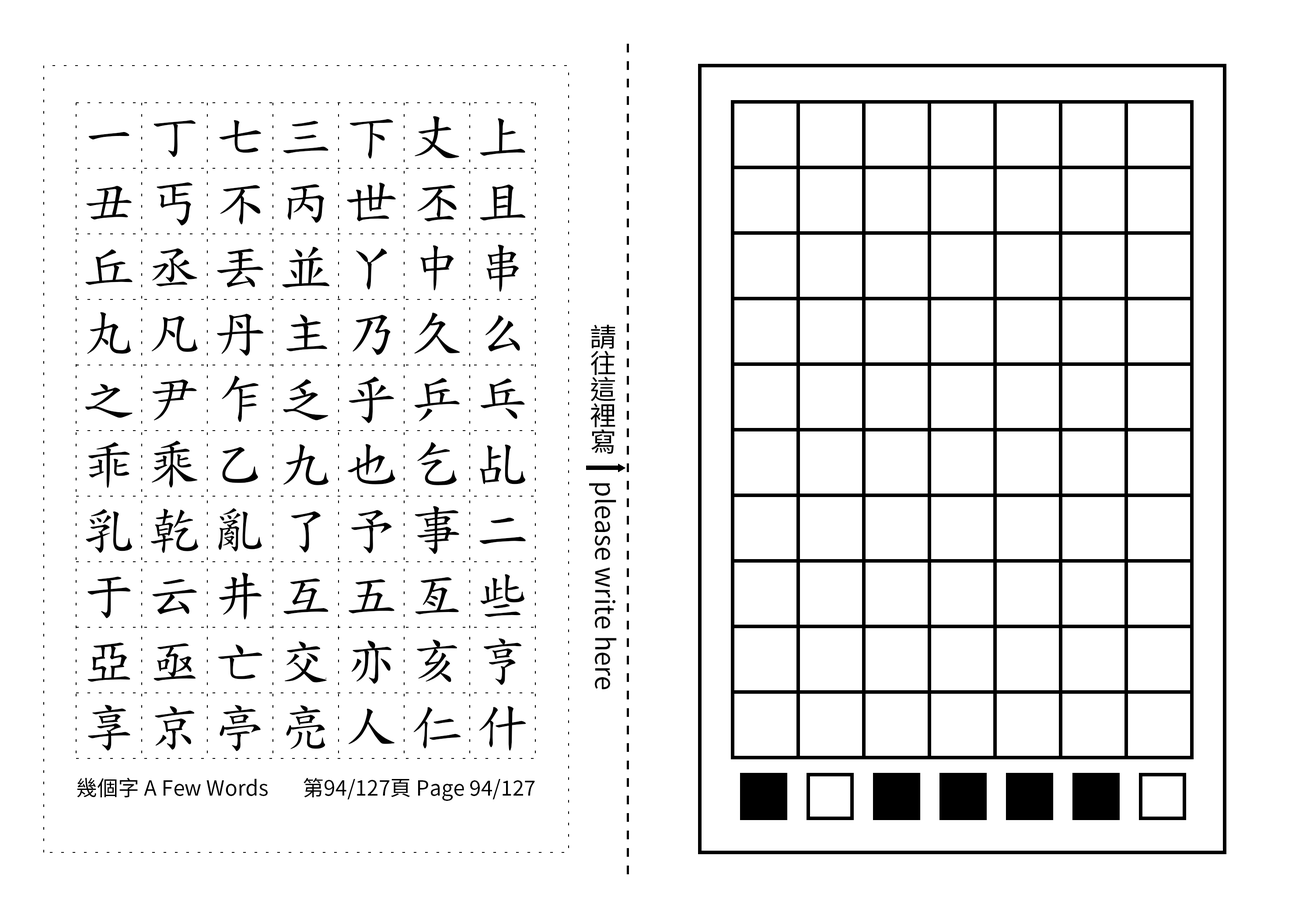
<style>
.page{position:relative;width:1299px;height:918px;background:#ffffff}
.page>*{position:absolute;margin:0}
.t1{font:52.5px/65.6px "TW-Kai-98_1";letter-spacing:0.25em;color:#000000}
.t2{font:26.2px "SourceHanSansTC-Regular";color:#000000}
.t3{font:21px "SourceHanSansTC-Regular";color:#000000}
</style>
<div class="page">
<p class="t1" style="left:85px;top:116px;width:441px;height:636px;text-align:center">一丁七三下丈上丑丐不丙世丕且丘丞丟並丫中串丸凡丹主乃久么之尹乍乏乎乒乓乖乘乙九也乞乩乳乾亂了予事二于云井互五亙些亞亟亡交亦亥亨享京亭亮人仁什</p>
<p class="t2" style="left:589px;top:324px;width:28px;height:366px;text-align:center">請往這裡寫　please write here</p>
<p class="t3" style="left:77px;top:778px;width:191px;height:20px">幾個字 A Few Words</p>
<p class="t3" style="left:303px;top:778px;width:232px;height:23px">第94/127頁 Page 94/127</p>
</div>
